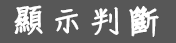
<style>
.page{position:relative;width:176px;height:43px;background:#575757}
.page>*{position:absolute;margin:0}
.t1{font:37.5px "DFYa-W3-WINP-BF";color:#ffffff;font-weight:bold}
</style>
<div class="page">
<p class="t1" style="left:14px;top:5px;width:145px;height:32px">顯示判斷</p>
</div>
